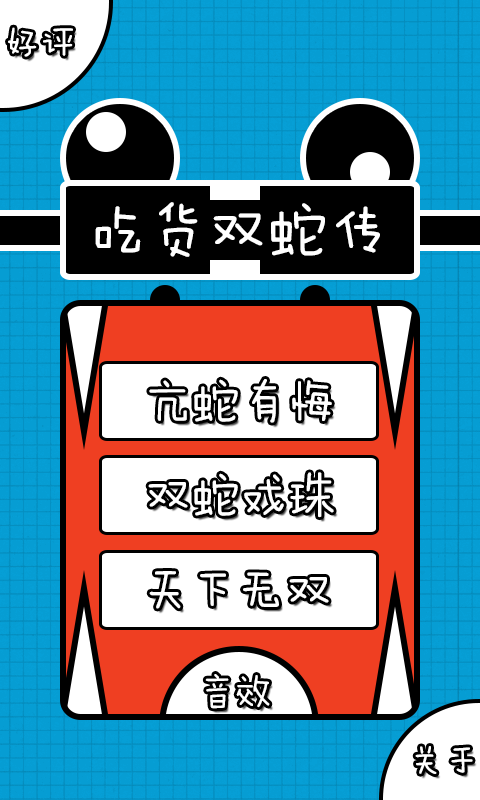
<style>
.page{position:relative;width:480px;height:800px;background:#ffffff}
.page>*{position:absolute;margin:0}
.t1{font:36px "FZMWJW--GB1-0";color:#ffffff}
.t2{font:60px "FZMWJW--GB1-0";color:#ffffff}
.t3{font:48px "FZMWJW--GB1-0";color:#ffffff}
</style>
<div class="page">
<p class="t1" style="left:8px;top:27px;width:65px;height:30px">好评</p>
<p class="t2" style="left:95px;top:202px;width:285px;height:55px">吃货双蛇传</p>
<p class="t3" style="left:149px;top:379px;width:183px;height:44px">亢蛇有悔</p>
<p class="t3" style="left:148px;top:472px;width:186px;height:46px">双蛇戏珠</p>
<p class="t1" style="left:205px;top:674px;width:65px;height:35px">音效</p>
<p class="t1" style="left:415px;top:746px;width:58px;height:28px">关于</p>
</div>
